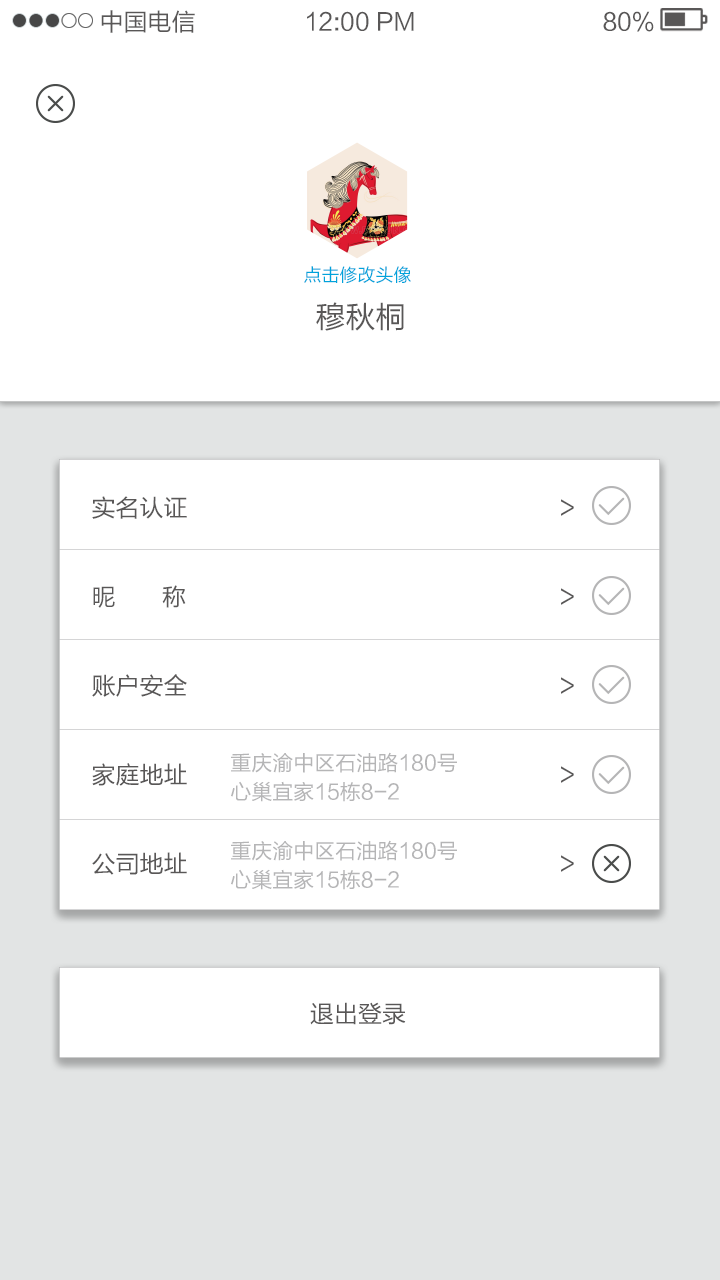
<style>
.page{position:relative;width:720px;height:1280px;background:#ffffff}
.page>*{position:absolute;margin:0}
.t1{font:24px "FZLTHK--GBK1-0";color:#595757}
.t2{font:18px "FZLTHK--GBK1-0";color:#00a3db}
.t3{font:30px "FZLTHK--GBK1-0";color:#595757}
.t4{font:24px/89px "FZLTHK--GBK1-0";color:#595757}
.t5{font:21px/29px "FZLTHK--GBK1-0";color:#b5b5b6}
</style>
<div class="page">
<p class="t1" style="left:101px;top:10px;width:94px;height:23px">中国电信</p>
<p class="t1" style="left:307px;top:11px;width:107px;height:20px">12:00 PM</p>
<p class="t1" style="left:603px;top:11px;width:51px;height:21px">80%</p>
<p class="t2" style="left:304px;top:266px;width:107px;height:18px">点击修改头像</p>
<p class="t3" style="left:316px;top:302px;width:88px;height:29px">穆秋桐</p>
<p class="t4" style="left:92px;top:496px;width:482px;height:379px">实名认证           &gt;<br>昵       称           &gt;<br>账户安全           &gt;<br>家庭地址           &gt;<br>公司地址           &gt;</p>
<p class="t5" style="left:231px;top:752px;width:226px;height:50px">重庆渝中区石油路180号<br>心巢宜家15栋8-2</p>
<p class="t5" style="left:231px;top:840px;width:226px;height:50px">重庆渝中区石油路180号<br>心巢宜家15栋8-2</p>
<p class="t1" style="left:310px;top:1002px;width:96px;height:23px">退出登录</p>
</div>
